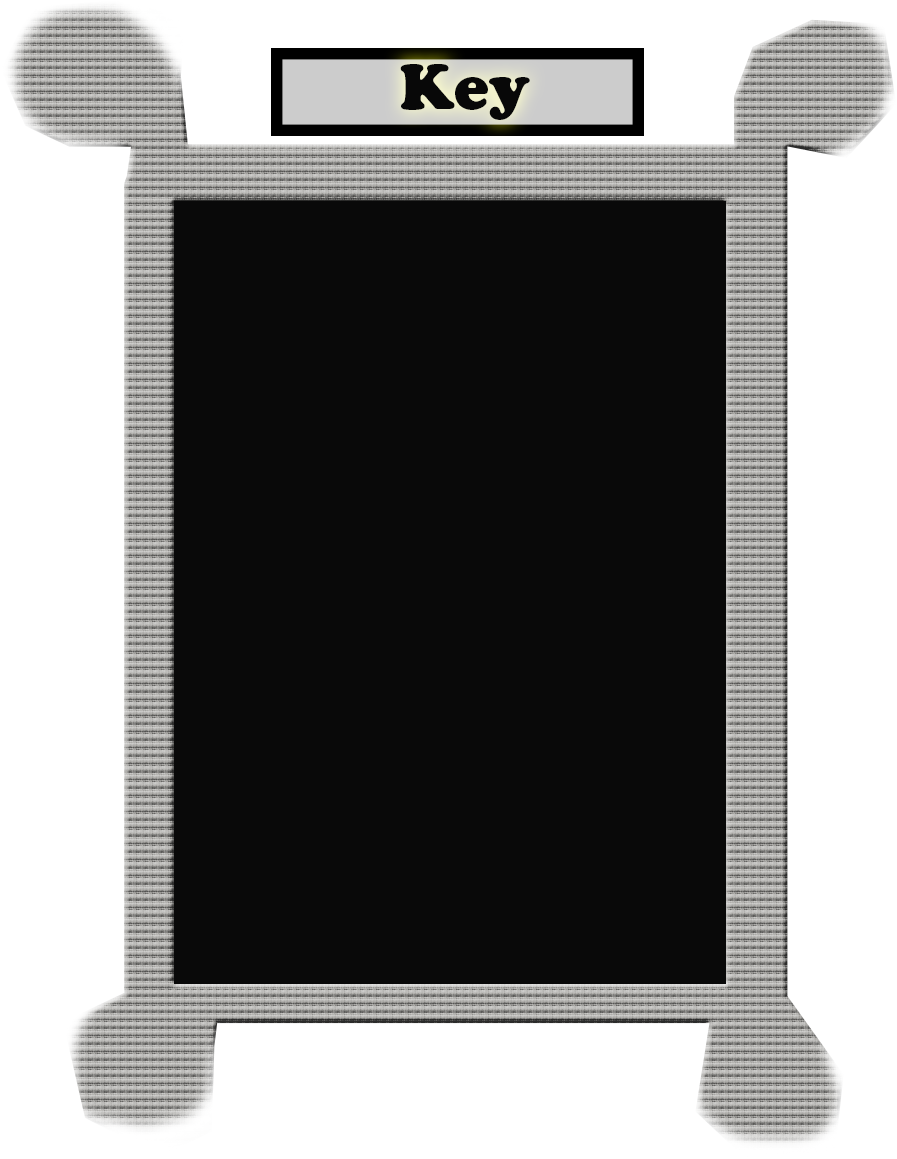
<style>
.page{position:relative;width:897px;height:1159px;background:#090909}
.page>*{position:absolute;margin:0}
.t1{font:62.5px "CooperBlackStd";color:#080808}
</style>
<div class="page">
<p class="t1" style="left:400px;top:64px;width:130px;height:56px">Key</p>
</div>
